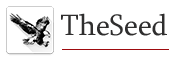
<style>
.page{position:relative;width:180px;height:60px;background:#ffffff}
.page>*{position:absolute;margin:0}
.t1{font:30px "Sylfaen";color:#2f2e2e}
</style>
<div class="page">
<p class="t1" style="left:61px;top:13px;width:106px;height:23px">TheSeed</p>
</div>
